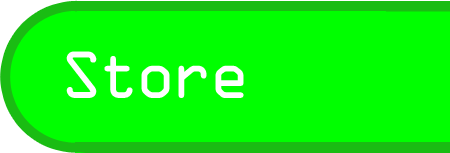
<style>
.page{position:relative;width:450px;height:153px;background:#00ff00}
.page>*{position:absolute;margin:0}
.t1{font:59.8px "OCRAStd";letter-spacing:-0.1em;color:#ffffff}
</style>
<div class="page">
<p class="t1" style="left:66px;top:51px;width:178px;height:47px">Store</p>
</div>
